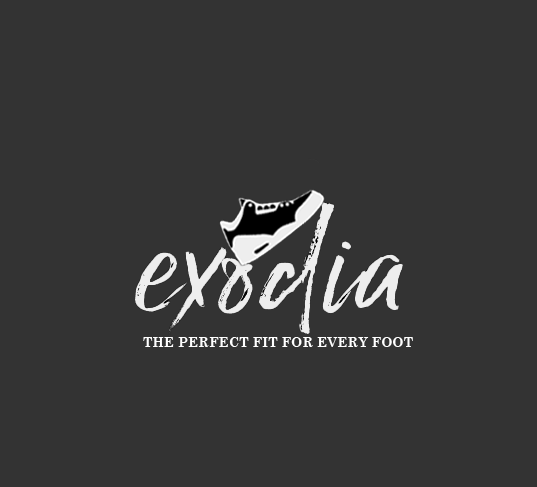
<style>
.page{position:relative;width:537px;height:487px;background:#333333}
.page>*{position:absolute;margin:0}
.t1{font:13.3px "CenturySchoolbook-Bold";color:#ffffff}
</style>
<div class="page">
<p class="t1" style="left:143px;top:337px;width:270px;height:10px">THE PERFECT FIT FOR EVERY FOOT</p>
</div>
